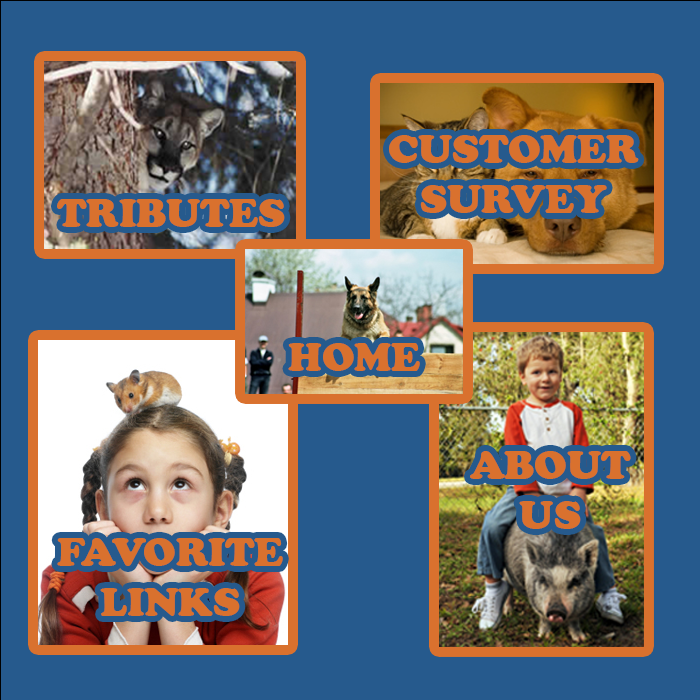
<style>
.page{position:relative;width:700px;height:700px;background:#265a8d}
.page>*{position:absolute;margin:0}
.t1{font:41.7px "CooperBlack";color:#d9712e}
</style>
<div class="page">
<p class="t1" style="left:389px;top:135px;width:250px;height:78px;text-align:center">CUSTOMER<br>SURVEY</p>
<p class="t1" style="left:57px;top:199px;width:228px;height:28px">TRIBUTES</p>
<p class="t1" style="left:288px;top:343px;width:132px;height:28px">HOME</p>
<p class="t1" style="left:470px;top:451px;width:161px;height:78px;text-align:center">ABOUT<br>US</p>
<p class="t1" style="left:57px;top:538px;width:226px;height:78px;text-align:center">FAVORITE<br>LINKS</p>
</div>
